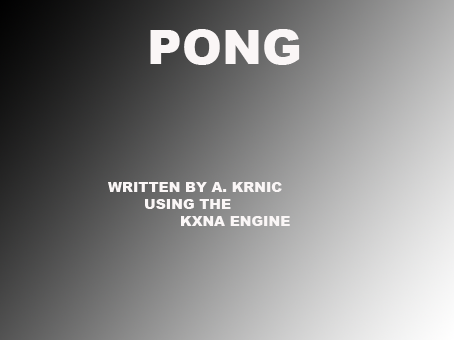
<style>
.page{position:relative;width:454px;height:340px}
.page>*{position:absolute;margin:0}
.t1{font:48px "Arial-Black";color:#faf6f6}
.t2{font:14px "Arial-Black";color:#faf6f6}
</style>
<div class="page">
<p class="t1" style="left:150px;top:29px;width:150px;height:36px">PONG</p>
<p class="t2" style="left:108px;top:182px;width:182px;height:44px">WRITTEN BY A. KRNIC<br> USING THE<br>  KXNA ENGINE</p>
</div>
